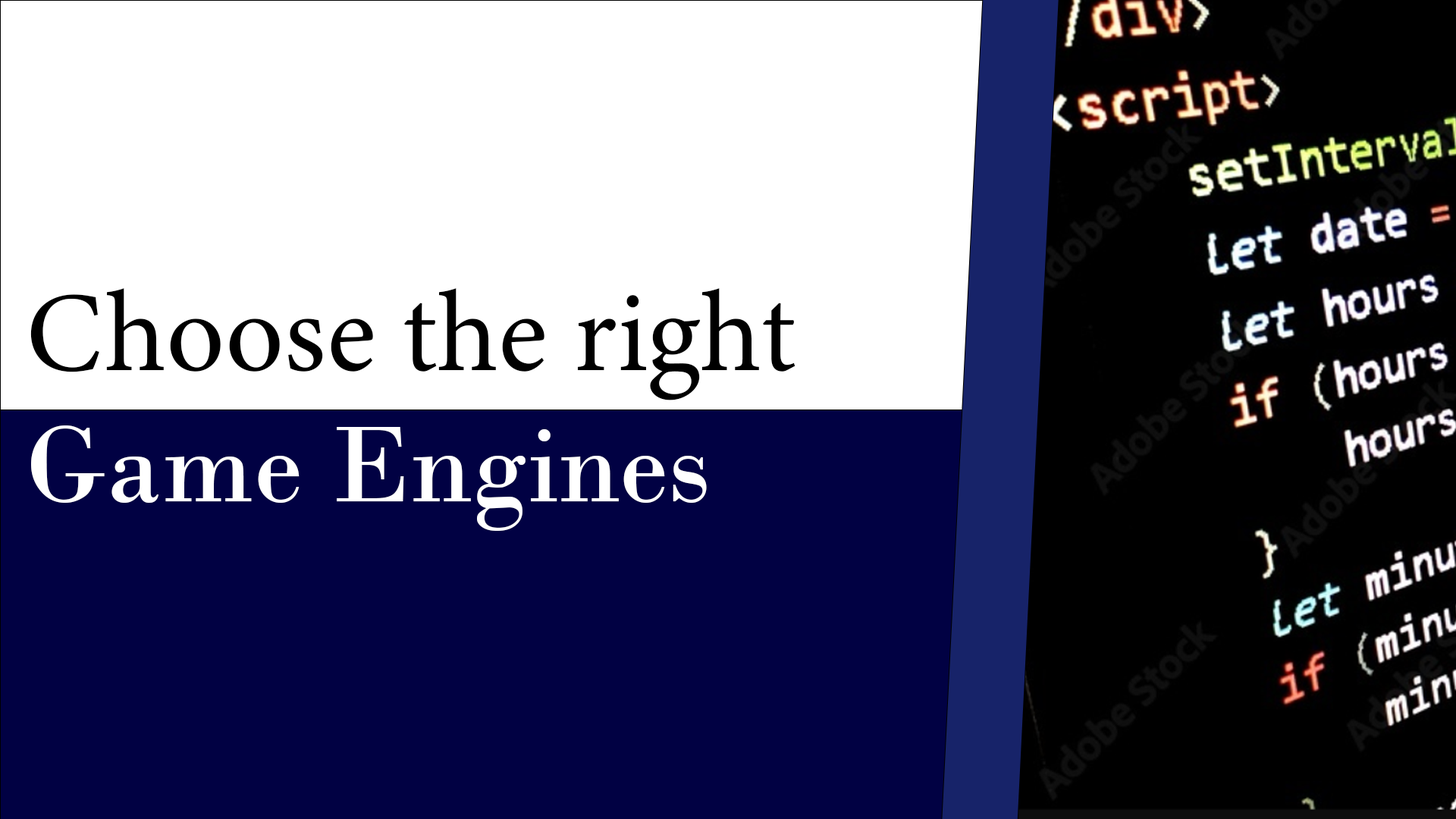
<style>
.page{position:relative;width:1456px;height:819px;background:#ffffff}
.page>*{position:absolute;margin:0}
.t1{font:113.7px "MinionVariableConcept-Roman";color:#000000}
.t2{font:113.7px "BodoniMT";color:#ffffff}
</style>
<div class="page">
<p class="t1" style="left:30px;top:288px;width:765px;height:112px">Choose the right</p>
<p class="t2" style="left:31px;top:425px;width:676px;height:106px">Game Engines</p>
</div>
